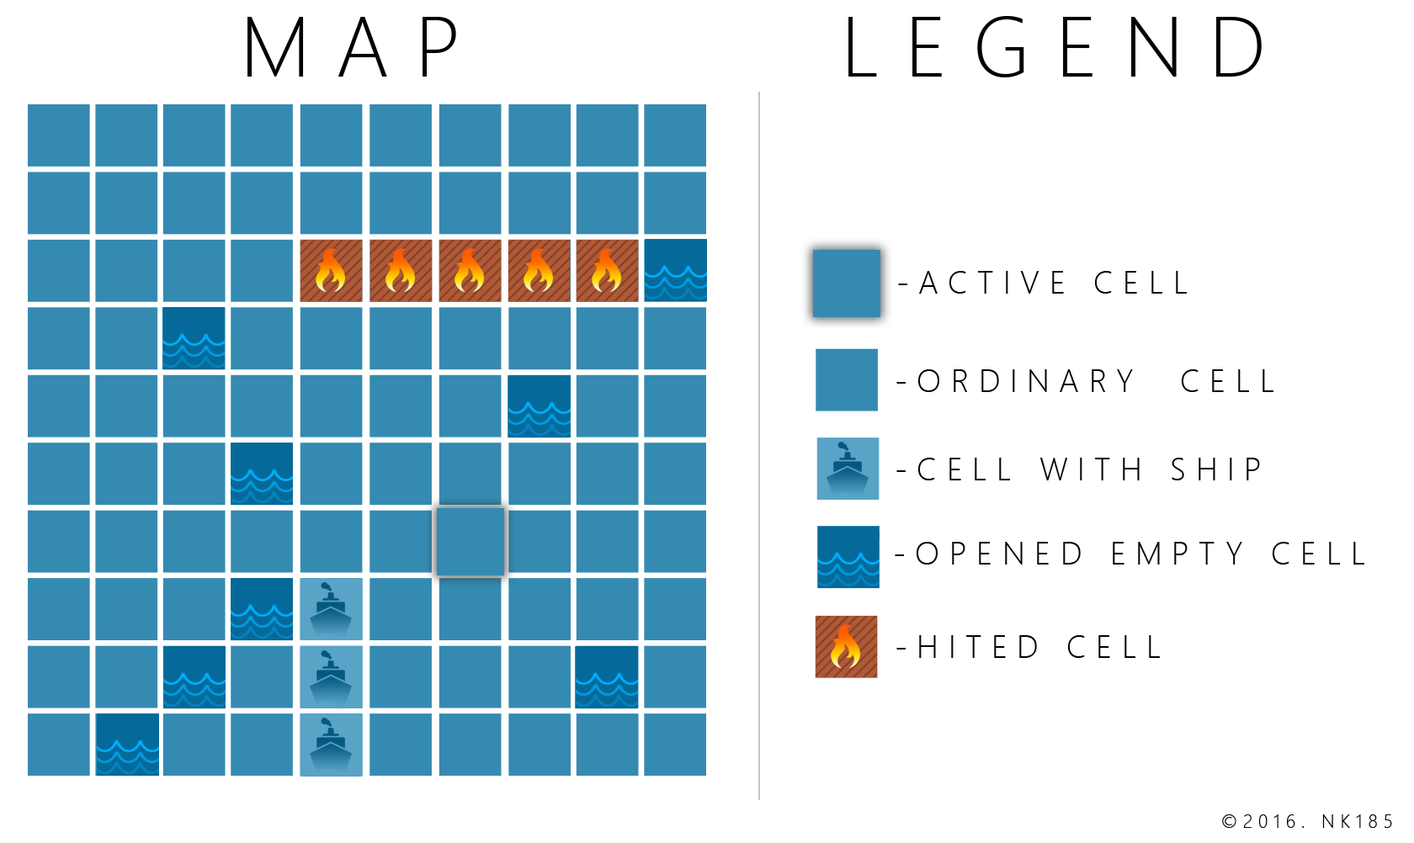
<style>
.page{position:relative;width:1414px;height:843px;background:#ffffff}
.page>*{position:absolute;margin:0}
.t1{font:84.9px "SegoeUI-Light";letter-spacing:0.3em;color:#000000}
.t2{font:32.1px "SegoeUI-Light";letter-spacing:0.3em;color:#000000}
.t3{font:32.1px "SegoeUI-Light";letter-spacing:0.3em;color:#000000;text-transform:uppercase}
.t4{font:18.7px "SegoeUI-Light";letter-spacing:0.3em;color:#000000;text-transform:uppercase}
</style>
<div class="page">
<p class="t1" style="left:247px;top:17px;width:209px;height:60px">MAP</p>
<p class="t1" style="left:848px;top:16px;width:414px;height:61px">LEGEND</p>
<p class="t2" style="left:898px;top:271px;width:289px;height:23px">-ACTIVE CELL</p>
<p class="t3" style="left:896px;top:369px;width:377px;height:23px">-ordinary  CELL</p>
<p class="t2" style="left:896px;top:458px;width:364px;height:23px">-CELL WITH SHIP</p>
<p class="t2" style="left:895px;top:542px;width:469px;height:23px">-OPENED EMPTY CELL</p>
<p class="t2" style="left:896px;top:635px;width:264px;height:23px">-HITED CELL</p>
<p class="t4" style="left:1222px;top:815px;width:170px;height:13px">©2016. NK185</p>
</div>
